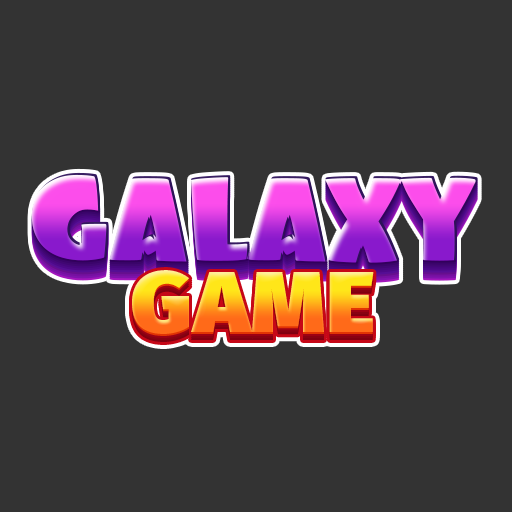
<style>
.page{position:relative;width:512px;height:512px;background:#333333}
.page>*{position:absolute;margin:0}
.t1{font:122.7px "Foo-Regular";letter-spacing:-0.02em;scale:1.05 1}
.t2{font:87.1px "FiraSans-Ultra";letter-spacing:0.025em;scale:1.05 1}
</style>
<div class="page">
<p class="t1" style="left:31px;top:172px;width:447px;height:91px">GALAXY</p>
<p class="t2" style="left:132px;top:270px;width:242px;height:64px">GAME</p>
</div>
